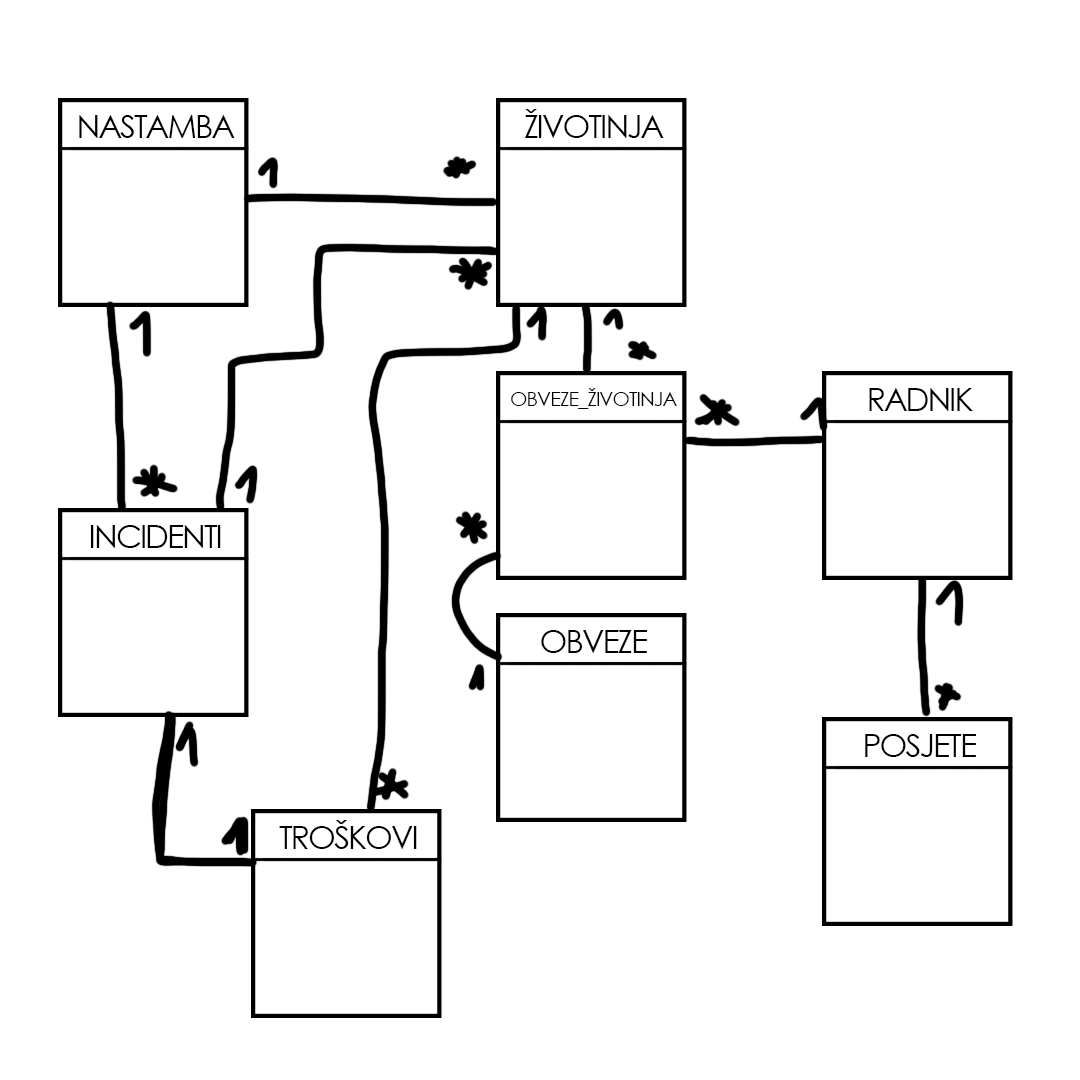
<style>
.page{position:relative;width:1080px;height:1080px;background:#ffffff}
.page>*{position:absolute;margin:0}
.t1{font:31.9px "CenturyGothic";letter-spacing:-0.06em;color:#000000;text-transform:uppercase}
.t2{font:20.5px "CenturyGothic";letter-spacing:-0.06em;color:#000000;text-transform:uppercase}
</style>
<div class="page">
<p class="t1" style="left:525px;top:109px;width:139px;height:29px">životinja</p>
<p class="t1" style="left:79px;top:115px;width:156px;height:23px">NASTAMBA</p>
<p class="t2" style="left:511px;top:388px;width:166px;height:21px">OBVEZE_Životinja</p>
<p class="t1" style="left:869px;top:388px;width:104px;height:23px">Radnik</p>
<p class="t1" style="left:90px;top:525px;width:131px;height:23px">Incidenti</p>
<p class="t1" style="left:541px;top:630px;width:107px;height:23px">OBVEZE</p>
<p class="t1" style="left:865px;top:734px;width:111px;height:23px">Posjete</p>
<p class="t1" style="left:279px;top:820px;width:138px;height:29px">Troškovi</p>
</div>
